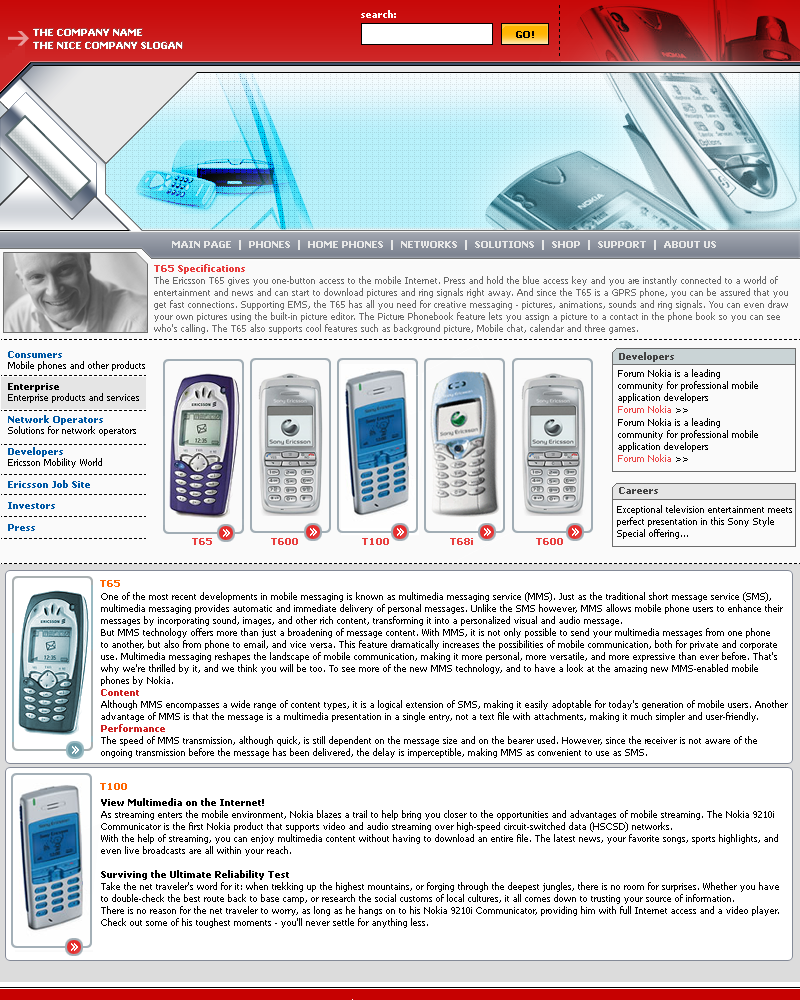
<style>
.page{position:relative;width:800px;height:1000px;background:#ffffff}
.page>*{position:absolute;margin:0}
.t1{font:9px "Tahoma-Bold";color:#ffffff}
.t2{font:9px "Verdana-Bold";color:#000000;text-transform:uppercase}
.t3{font:9px "Tahoma-Bold";color:#f9f9f9;text-transform:uppercase}
.t4{font:9px/12px "Tahoma";color:#6b6b6b}
.t5{font:9px/12px "Tahoma-Bold";color:#e83c3c}
.t6{font:9px "Tahoma-Bold";color:#0059a5}
.t7{font:9px "Tahoma";color:#000000}
.t8{font:9px "Tahoma-Bold";color:#000000}
.t9{font:9px "Tahoma-Bold";color:#444444}
.t10{font:9px/12px "Tahoma";color:#000000}
.t11{font:9px/12px "Tahoma";color:#e94343}
.t12{font:9px/12px "Tahoma";color:#e94545}
.t13{font:10px "Tahoma-Bold";color:#e83f3f}
.t14{font:10px "Tahoma-Bold";color:#ff6600}
.t15{font:9px/12px "Tahoma-Bold";color:#ce2323}
.t16{font:9px/12px "Tahoma-Bold";color:#cd2222}
.t17{font:9px/12px "Tahoma-Bold";color:#000000}
</style>
<div class="page">
<p class="t1" style="left:361px;top:10px;width:35px;height:8px">search:</p>
<p class="t1" style="left:33px;top:29px;width:109px;height:7px">THE COMPANY NAME</p>
<p class="t2" style="left:516px;top:31px;width:18px;height:7px">go!</p>
<p class="t1" style="left:33px;top:42px;width:149px;height:7px">THE NICE COMPANY SLOGAN</p>
<p class="t3" style="left:172px;top:240px;width:544px;height:10px">Main Page  |  Phones  |  home phones  |  networks  |  solutions  |  shop  |  SUPPORT  |  ABOUT US</p>
<p class="t4" style="left:154px;top:264px;width:634px;height:70px"><span class="t5">T65 Specifications<br></span>The Ericsson T65 gives you one-button access to the mobile Internet. Press and hold the blue access key and you are instantly connected to a world of <br>entertainment and news and can start to download pictures and ring signals right away. And since the T65 is a GPRS phone, you can be assured that you <br>get fast connections. Supporting EMS, the T65 has all you need for creative messaging - pictures, animations, sounds and ring signals. You can even draw <br>your own pictures using the built-in picture editor. The Picture Phonebook feature lets you assign a picture to a contact in the phone book so you can see <br>who's calling. The T65 also supports cool features such as background picture, Mobile chat, calendar and three games.</p>
<p class="t6" style="left:8px;top:351px;width:137px;height:180px">Consumers<br><span class="t7">Mobile phones and other products<br><br></span><span class="t8">Enterprise<br></span><span class="t7">Enterprise products and services<br><br></span>Network Operators<br><span class="t7">Solutions for network operators<br><br></span>Developers<br><span class="t7">Ericsson Mobility World<br><br></span>Ericsson Job Site<br><br>Investors<br><br>Press</p>
<p class="t9" style="left:619px;top:352px;width:55px;height:10px">Developers</p>
<p class="t10" style="left:618px;top:369px;width:140px;height:44px">Forum Nokia is a leading<br>community for professional mobile<br>application developers<br><span class="t11">Forum Nokia</span> &gt;&gt;</p>
<p class="t10" style="left:618px;top:418px;width:140px;height:44px">Forum Nokia is a leading<br>community for professional mobile<br>application developers<br><span class="t12">Forum Nokia</span> &gt;&gt;</p>
<p class="t9" style="left:619px;top:487px;width:39px;height:7px">Careers</p>
<p class="t10" style="left:617px;top:505px;width:175px;height:34px">Exceptional television entertainment meets<br>perfect presentation in this Sony Style<br>Special offering...</p>
<p class="t13" style="left:192px;top:538px;width:20px;height:7px">T65</p>
<p class="t13" style="left:271px;top:538px;width:27px;height:7px">T600</p>
<p class="t13" style="left:362px;top:538px;width:27px;height:7px">T100</p>
<p class="t13" style="left:450px;top:538px;width:23px;height:7px">T68i</p>
<p class="t13" style="left:536px;top:538px;width:27px;height:7px">T600</p>
<p class="t14" style="left:100px;top:580px;width:20px;height:7px">T65</p>
<p class="t10" style="left:101px;top:592px;width:687px;height:166px">One of the most recent developments in mobile messaging is known as multimedia messaging service (MMS). Just as the traditional short message service (SMS), <br>multimedia messaging provides automatic and immediate delivery of personal messages. Unlike the SMS however, MMS allows mobile phone users to enhance their <br>messages by incorporating sound, images, and other rich content, transforming it into a personalized visual and audio message.<br>But MMS technology offers more than just a broadening of message content. With MMS, it is not only possible to send your multimedia messages from one phone <br>to another, but also from phone to email, and vice versa. This feature dramatically increases the possibilities of mobile communication, both for private and corporate <br>use. Multimedia messaging reshapes the landscape of mobile communication, making it more personal, more versatile, and more expressive than ever before. That's <br>why we're thrilled by it, and we think you will be too. To see more of the new MMS technology, and to have a look at the amazing new MMS-enabled mobile <br>phones by Nokia.<br><span class="t15">Content<br></span>Although MMS encompasses a wide range of content types, it is a logical extension of SMS, making it easily adoptable for today's generation of mobile users. Another <br>advantage of MMS is that the message is a multimedia presentation in a single entry, not a text file with attachments, making it much simpler and user-friendly.<br><span class="t16">Performance<br></span>The speed of MMS transmission, although quick, is still dependent on the message size and on the bearer used. However, since the receiver is not aware of the <br>ongoing transmission before the message has been delivered, the delay is imperceptible, making MMS as convenient to use as SMS.</p>
<p class="t14" style="left:100px;top:783px;width:27px;height:7px">T100</p>
<p class="t10" style="left:101px;top:798px;width:678px;height:130px"><span class="t17">View Multimedia on the Internet!<br></span>As streaming enters the mobile environment, Nokia blazes a trail to help bring you closer to the opportunities and advantages of mobile streaming. The Nokia 9210i <br>Communicator is the first Nokia product that supports video and audio streaming over high-speed circuit-switched data (HSCSD) networks.<br>With the help of streaming, you can enjoy multimedia content without having to download an entire file. The latest news, your favorite songs, sports highlights, and <br>even live broadcasts are all within your reach.<br><br><span class="t17">Surviving the Ultimate Reliability Test<br></span>Take the net traveler's word for it: when trekking up the highest mountains, or forging through the deepest jungles, there is no room for surprises. Whether you have <br>to double-check the best route back to base camp, or research the social customs of local cultures, it all comes down to trusting your source of information.<br>There is no reason for the net traveler to worry, as long as he hangs on to his Nokia 9210i Communicator, providing him with full Internet access and a video player. <br>Check out some of his toughest moments - you'll never settle for anything less.</p>
</div>
